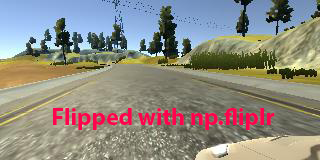
<style>
.page{position:relative;width:320px;height:160px}
.page>*{position:absolute;margin:0}
.t1{font:24px "MyriadPro-Bold";color:#fd034e}
</style>
<div class="page">
<p class="t1" style="left:53px;top:108px;width:222px;height:22px">Flipped with np.fliplr</p>
</div>
